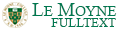
<style>
.page{position:relative;width:120px;height:30px;background:#ffffff}
.page>*{position:absolute;margin:0}
.t1{font:14px "CalistoMT";color:#007850}
.t2{font:18px "CalistoMT";color:#007850}
.t3{font:12px "CalistoMT";color:#007850}
</style>
<div class="page">
<p class="t1" style="left:32px;top:3px;width:85px;height:13px"><span class="t2">L</span>E<span class="t2"> M</span>OYNE</p>
<p class="t3" style="left:51px;top:18px;width:65px;height:9px">FULLTEXT</p>
</div>
